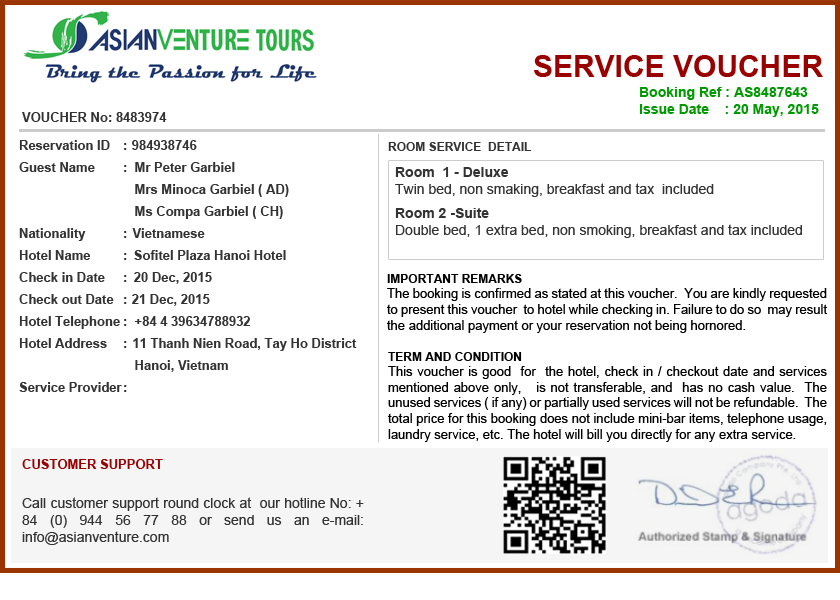
<style>
.page{position:relative;width:840px;height:600px;background:#ffffff}
.page>*{position:absolute;margin:0}
.t1{font:30px "Arial-BoldMT";color:#990000}
.t2{font:14px "Arial-BoldMT";color:#009900}
.t3{font:13px "Arial-BoldMT";color:#333333}
.t4{font:13px/22px "Arial-BoldMT";color:#333333}
.t5{font:12px "Arial-BoldMT";color:#333333}
.t6{font:14px "ArialMT";color:#333333}
.t7{font:14px "Arial-BoldMT";color:#333333}
.t8{font:14px/24px "Arial-BoldMT";color:#333333}
.t9{font:13px "ArialMT";color:#000000}
.t10{font:12px "Arial-BoldMT";color:#000000}
.t11{font:13px/22px "Arial-BoldMT";color:#990000}
</style>
<div class="page">
<p class="t1" style="left:534px;top:55px;width:289px;height:22px">SERVICE VOUCHER</p>
<p class="t2" style="left:639px;top:87px;width:180px;height:30px;text-align:justify">Booking Ref : AS8487643<br>Issue Date    : 20 May, 2015</p>
<p class="t3" style="left:22px;top:112px;width:145px;height:10px">VOUCHER No: 8483974</p>
<p class="t4" style="left:19px;top:140px;width:338px;height:252px;text-align:justify">Reservation ID      984938746<br>Guest Name           Mr Peter Garbiel<br>                                Mrs Minoca Garbiel ( AD)<br>                                Ms Compa Garbiel ( CH) <br>Nationality             Vietnamese <br>Hotel Name            Sofitel Plaza Hanoi Hotel<br>Check in Date        20 Dec, 2015<br>Check out Date     21 Dec, 2015<br>Hotel Telephone    +84 4 39634788932 <br>Hotel Address       11 Thanh Nien Road, Tay Ho District<br>                                Hanoi, Vietnam<br>Service Provider</p>
<p class="t4" style="left:124px;top:143px;width:3px;height:249px;text-align:justify">:<br>:<br><br><br>:<br>:<br>:<br>:<br>:<br>:<br><br>:</p>
<p class="t5" style="left:388px;top:142px;width:144px;height:9px">ROOM SERVICE  DETAIL</p>
<p class="t6" style="left:395px;top:167px;width:407px;height:71px;text-align:justify"><span class="t7">Room  1 - Deluxe<br></span>Twin bed, non smaking, breakfast and tax  included<br><span class="t8">Room 2 -Suite <br></span>Double bed, 1 extra bed, non smoking, breakfast and tax included</p>
<p class="t9" style="left:387px;top:274px;width:441px;height:59px;text-align:justify"><span class="t10">IMPORTANT REMARKS</span> <br>The booking is confirmed as stated at this voucher.  You are kindly requested to present this voucher  to hotel while checking in. Failure to do so  may result the additional payment or your reservation not being hornored.</p>
<p class="t9" style="left:388px;top:352px;width:439px;height:90px;text-align:justify"><span class="t10">TERM AND CONDITION <br></span>This voucher is good  for  the hotel, check in / checkout date and services mentioned above only,   is not transferable, and  has no cash value.  The unused services ( if any) or partially used services will not be refundable.  The total price for this booking does not include mini-bar items, telephone usage, laundry service, etc. The hotel will bill you directly for any extra service.</p>
<p class="t6" style="left:22px;top:459px;width:342px;height:86px"><span class="t11">CUSTOMER SUPPORT<br><br></span>Call customer support round clock at  our hotline No: + 84 (0) 944 56 77 88 or send us an e-mail:  info@asianventure.com</p>
</div>
